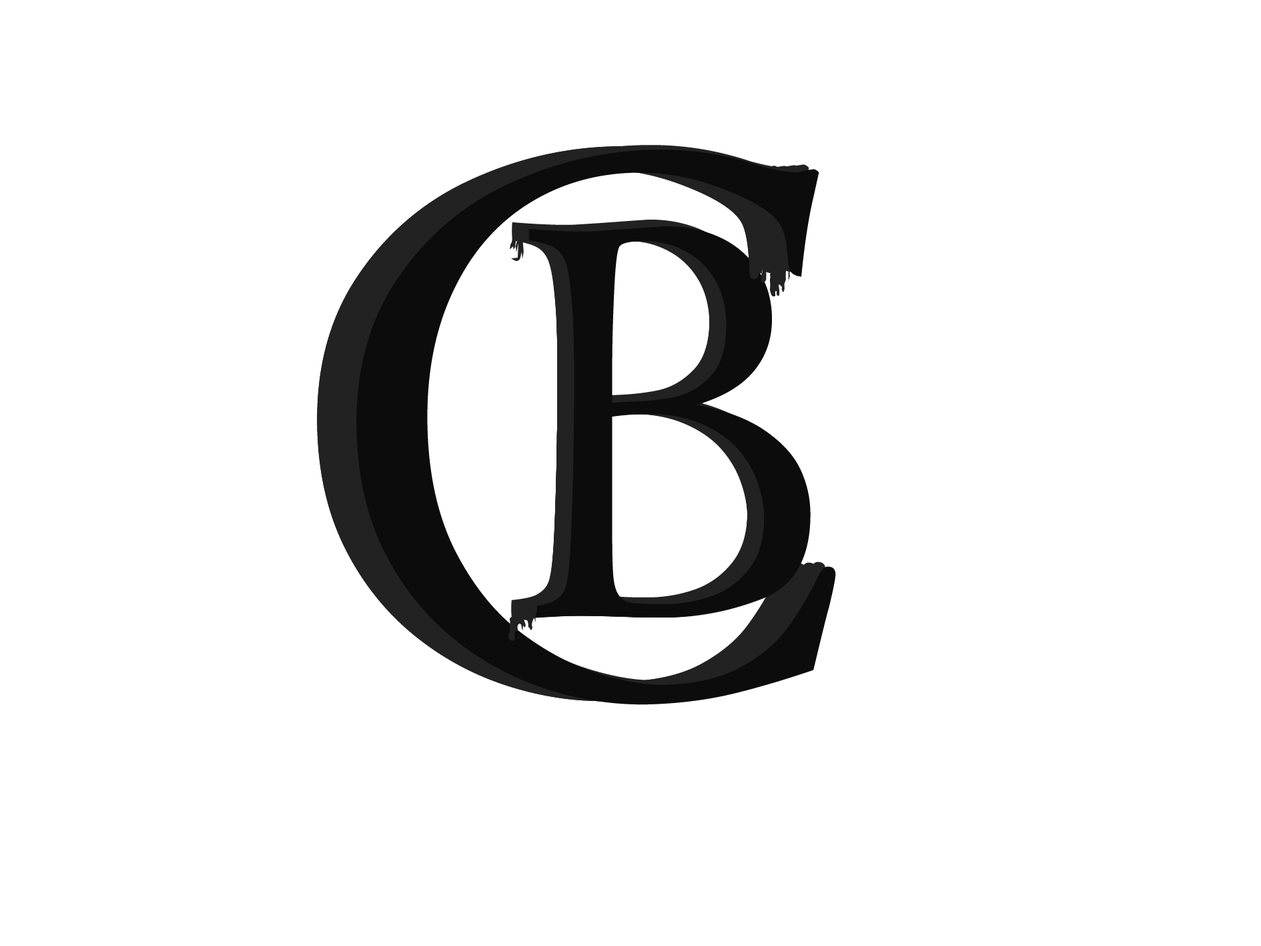
<style>
.page{position:relative;width:1261px;height:946px;background:#ffffff}
.page>*{position:absolute;margin:0}
.t1{font:853.3px "Centaur";letter-spacing:0.075em;color:#232222;font-variant:small-caps}
.t2{font:853.3px "Centaur";letter-spacing:0.075em;color:#0c0c0c;font-variant:small-caps}
.t3{font:610.6px "Centaur";letter-spacing:0.075em;color:#232222;font-variant:small-caps}
.t4{font:610.6px "Centaur";letter-spacing:0.075em;color:#0c0c0c;font-variant:small-caps}
</style>
<div class="page">
<p class="t1" style="left:317px;top:146px;width:480px;height:555px;rotate:-2deg">C</p>
<p class="t1" style="left:317px;top:146px;width:480px;height:555px;rotate:-2deg">C</p>
<p class="t1" style="left:327px;top:146px;width:480px;height:555px;rotate:-2deg">C</p>
<p class="t1" style="left:337px;top:145px;width:480px;height:556px;rotate:-2deg">C</p>
<p class="t1" style="left:346px;top:145px;width:480px;height:555px;rotate:-2deg">C</p>
<p class="t2" style="left:356px;top:149px;width:480px;height:556px;rotate:-2deg">C</p>
<p class="t3" style="left:511px;top:221px;width:283px;height:392px">B</p>
<p class="t3" style="left:511px;top:220px;width:283px;height:391px">B</p>
<p class="t3" style="left:511px;top:226px;width:283px;height:392px">B</p>
<p class="t3" style="left:511px;top:224px;width:283px;height:391px">B</p>
<p class="t3" style="left:511px;top:222px;width:283px;height:392px">B</p>
<p class="t3" style="left:514px;top:226px;width:283px;height:392px">B</p>
<p class="t3" style="left:516px;top:226px;width:283px;height:392px">B</p>
<p class="t3" style="left:519px;top:226px;width:283px;height:392px">B</p>
<p class="t3" style="left:522px;top:226px;width:283px;height:392px">B</p>
<p class="t3" style="left:524px;top:226px;width:283px;height:392px">B</p>
<p class="t4" style="left:528px;top:226px;width:283px;height:392px">B</p>
</div>
